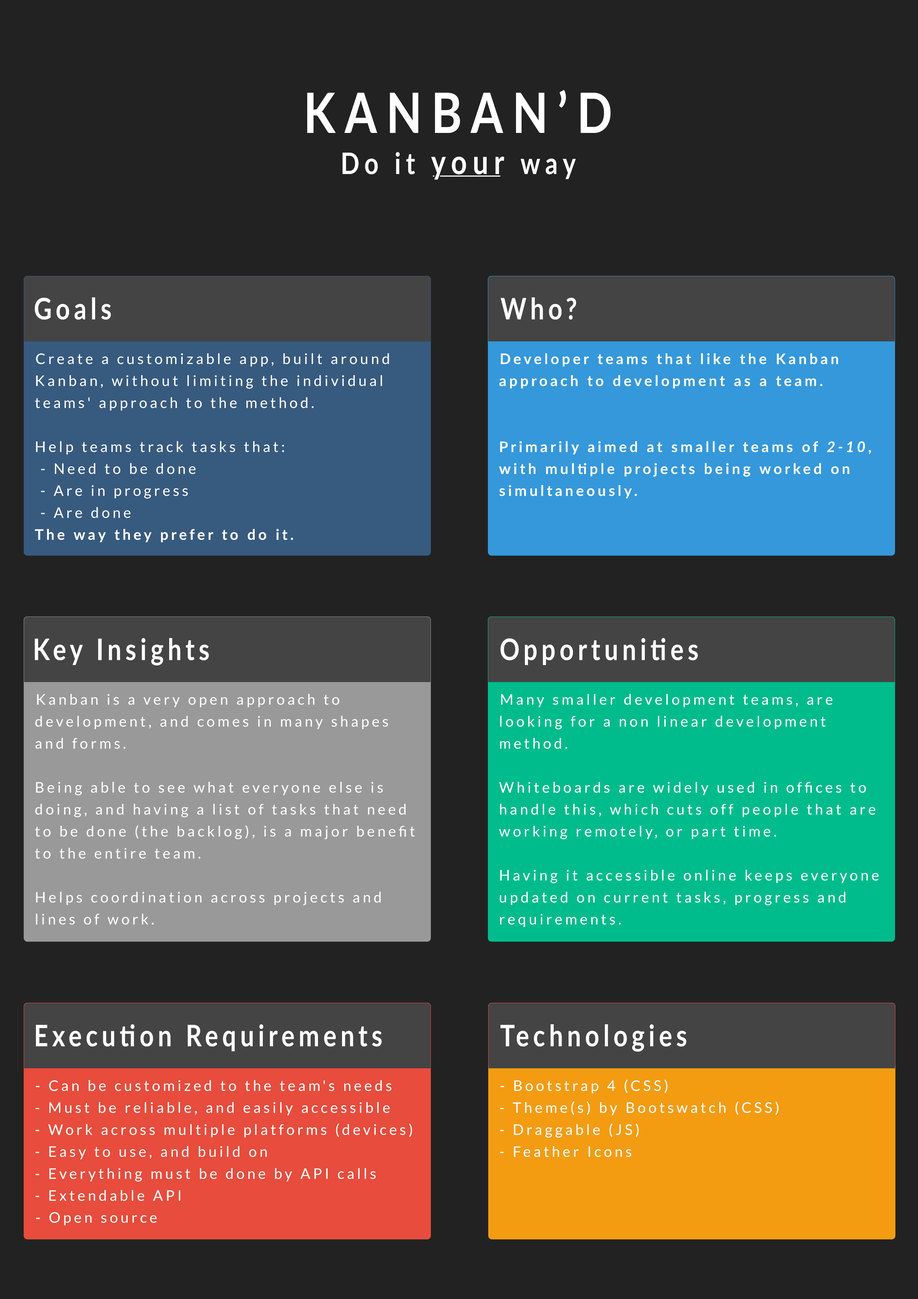
<style>
.page{position:relative;width:918px;height:1299px;background:#222222}
.page>*{position:absolute;margin:0}
.t1{font:55.5px "Lato-Bold";letter-spacing:0.204em;color:#ffffff;scale:0.83 1}
.t2{font:29.6px "Lato-Bold";letter-spacing:0.204em;color:#ffffff;scale:0.83 1}
.t3{font:33.3px "Lato-Bold";letter-spacing:0.204em;color:#ffffff;scale:0.83 1}
.t4{font:29.6px "Lato-Bold";letter-spacing:0.164em;color:#ffffff;scale:0.83 1}
.t5{font:14.6px/22px "Lato-Regular";letter-spacing:0.184em;color:#ffffff}
.t6{font:14.6px/22px "Lato-Bold";letter-spacing:0.184em;color:#ffffff}
.t7{font:14.6px/22px "Lato-BoldItalic";letter-spacing:0.184em;color:#ffffff}
</style>
<div class="page">
<p class="t1" style="left:307px;top:90px;width:304px;height:43px">KANBAN’D</p>
<p class="t2" style="left:342px;top:152px;width:234px;height:28px">Do it <span class="t3">your</span> way</p>
<p class="t4" style="left:35px;top:297px;width:76px;height:23px">Goals</p>
<p class="t4" style="left:501px;top:297px;width:75px;height:23px">Who?</p>
<p class="t5" style="left:35px;top:353px;width:354px;height:189px">Create a customizable app, built around Kanban, without limiting the individual teams' approach to the method.<br><br>Help teams track tasks that:<br> - Need to be done<br> - Are in progress<br> - Are done<br><span class="t6">The way they prefer to do it.</span></p>
<p class="t6" style="left:499px;top:353px;width:372px;height:145px">Developer teams that like the Kanban approach to development as a team.<br><br><br>Primarily aimed at smaller teams of <span class="t7">2-10</span>, with multiple projects being worked on simultaneously.</p>
<p class="t4" style="left:35px;top:638px;width:174px;height:27px">Key Insights</p>
<p class="t4" style="left:501px;top:638px;width:197px;height:27px">Opportunities</p>
<p class="t5" style="left:35px;top:694px;width:380px;height:230px">Kanban is a very open approach to development, and comes in many shapes and forms.<br><br>Being able to see what everyone else is doing, and having a list of tasks that need to be done (the backlog), is a major benefit to the entire team.<br><br>Helps coordination across projects and lines of work.</p>
<p class="t5" style="left:499px;top:694px;width:380px;height:233px">Many smaller development teams, are looking for a non linear development method.<br><br>Whiteboards are widely used in offices to handle this, which cuts off people that are working remotely, or part time.<br><br>Having it accessible online keeps everyone updated on current tasks, progress and requirements.</p>
<p class="t4" style="left:36px;top:1024px;width:346px;height:27px">Execution Requirements</p>
<p class="t4" style="left:501px;top:1024px;width:185px;height:27px">Technologies</p>
<p class="t5" style="left:36px;top:1080px;width:376px;height:145px">- Can be customized to the team's needs<br>- Must be reliable, and easily accessible<br>- Work across multiple platforms (devices)<br>- Easy to use, and build on<br>- Everything must be done by API calls<br>- Extendable API<br>- Open source</p>
<p class="t5" style="left:500px;top:1079px;width:279px;height:78px">- Bootstrap 4 (CSS)<br>- Theme(s) by Bootswatch (CSS)<br>- Draggable (JS)<br>- Feather Icons</p>
</div>
